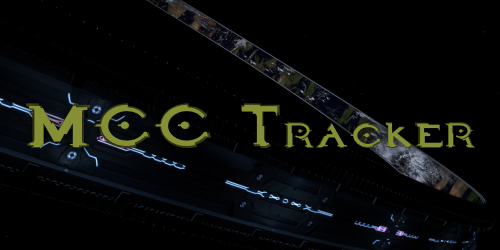
<style>
.page{position:relative;width:500px;height:250px;background:#000000}
.page>*{position:absolute;margin:0}
.t1{font:85px "Halo";color:#858f33;scale:0.61 1}
</style>
<div class="page">
<p class="t1" style="left:26px;top:103px;width:450px;height:45px">MCC Tracker</p>
</div>
